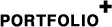
<style>
.page{position:relative;width:112px;height:27px;background:#ffffff}
.page>*{position:absolute;margin:0}
.t1{font:25px "HYgtrE";color:#000000;font-weight:bold}
.t2{font:15px "HYgtrE";color:#000000;font-weight:bold}
</style>
<div class="page">
<p class="t1" style="left:99px;top:0px;width:13px;height:13px">+</p>
<p class="t2" style="left:0px;top:14px;width:99px;height:13px">PORTFOLIO</p>
</div>
